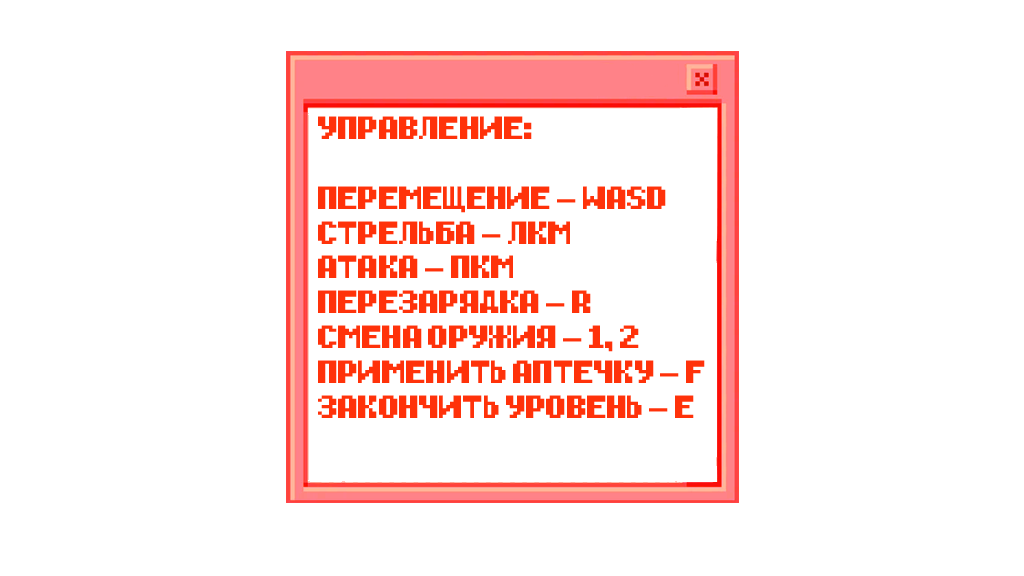
<style>
.page{position:relative;width:1024px;height:576px;background:#ffffff}
.page>*{position:absolute;margin:0}
.t1{font:29.1px "Diary-of-an-8-bit-mage";letter-spacing:-0.05em;color:#ff320a;scale:1.13 1}
</style>
<div class="page">
<p class="t1" style="left:318px;top:116px;width:387px;height:302px">УПРАВЛЕНИЕ:<br><br>ПЕРЕМЕЩЕНИЕ - WASD<br>СТРЕЛЬБА - ЛКМ<br>АТАКА - ПКМ<br>ПЕРЕЗАРЯДКА - R<br>СМЕНА ОРУЖИЯ - 1, 2<br>ПРИМЕНИТЬ АПТЕЧКУ - F<br>ЗАКОНЧИТЬ УРОВЕНЬ - E</p>
</div>
